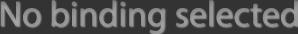
<style>
.page{position:relative;width:298px;height:34px;background:#333333}
.page>*{position:absolute;margin:0}
.t1{font:36px "MyriadPro-Regular";color:#959595}
</style>
<div class="page">
<p class="t1" style="left:0px;top:0px;width:298px;height:34px">No binding selected</p>
</div>
